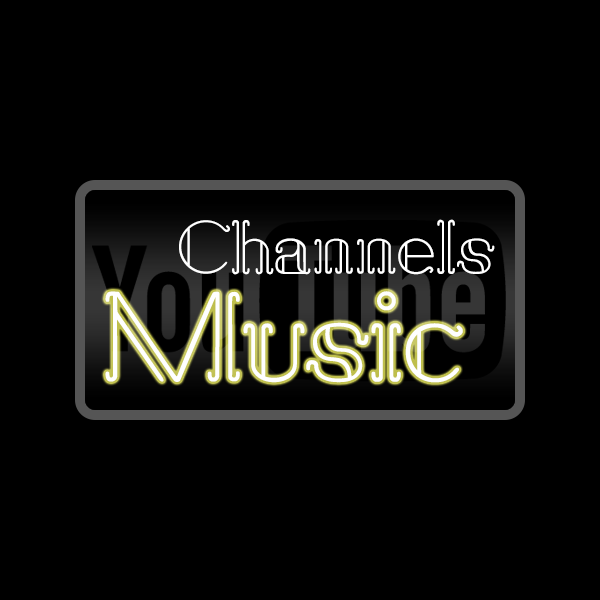
<style>
.page{position:relative;width:600px;height:600px;background:#000000}
.page>*{position:absolute;margin:0}
.t1{font:72.3px "SailAway";color:#ffffff}
.t2{font:120px "SailAway";color:#ffffff}
</style>
<div class="page">
<p class="t1" style="left:179px;top:219px;width:316px;height:56px">Channels</p>
<p class="t2" style="left:105px;top:291px;width:358px;height:92px">Music</p>
</div>
